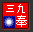
<style>
.page{position:relative;width:33px;height:32px;background:#f20000}
.page>*{position:absolute;margin:0}
.t1{font:10.4px "SimSun";color:#ffffff}
.t2{font:11.7px "SimSun";color:#ffffff}
</style>
<div class="page">
<p class="t1" style="left:6px;top:4px;width:19px;height:9px">三九</p>
<p class="t2" style="left:16px;top:15px;width:11px;height:12px">奉</p>
</div>
